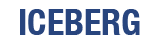
<style>
.page{position:relative;width:160px;height:45px;background:#ffffff}
.page>*{position:absolute;margin:0}
.t1{font:36px "HelveticaNeue-CondensedBold";color:#28457e}
</style>
<div class="page">
<p class="t1" style="left:20px;top:9px;width:120px;height:26px">ICEBERG</p>
</div>
